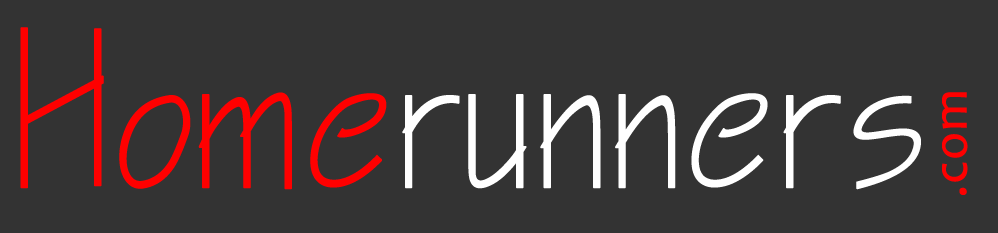
<style>
.page{position:relative;width:998px;height:233px;background:#333333}
.page>*{position:absolute;margin:0}
.t1{font:200px "CityBlueprint";color:#ffffff;font-weight:bold}
.t2{font:200px "CityBlueprint";color:#ff0000;font-weight:bold}
.t3{font:50px "Candara";color:#ff0000;font-weight:bold}
</style>
<div class="page">
<p class="t1" style="left:20px;top:27px;width:901px;height:163px"><span class="t2">Home</span>runners</p>
<p class="t3" style="left:942px;top:92px;width:26px;height:103px;rotate:-90deg">.com</p>
</div>
